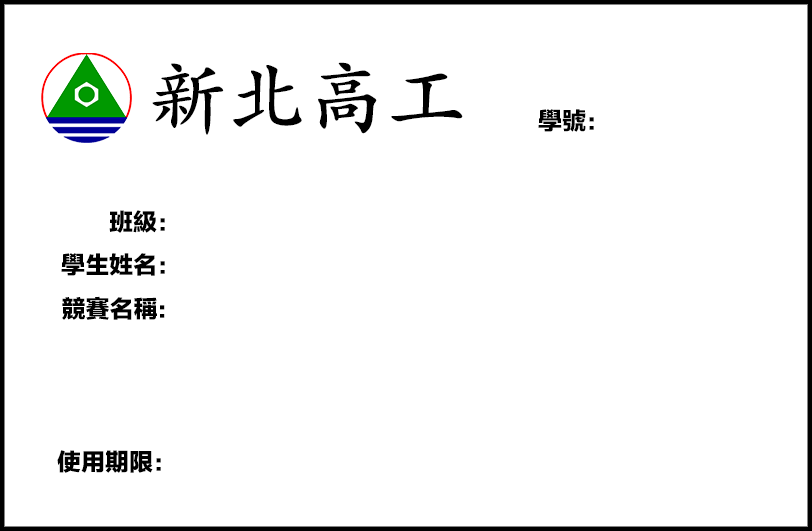
<style>
.page{position:relative;width:812px;height:531px;background:#ffffff}
.page>*{position:absolute;margin:0}
.t1{font:80px "STKaitiTC-Bold";color:#000000}
.t2{font:24px "FZLTTHK--GBK1-0";color:#000000}
</style>
<div class="page">
<p class="t1" style="left:152px;top:62px;width:311px;height:73px">新北高工</p>
<p class="t2" style="left:538px;top:109px;width:56px;height:23px">學號 ：</p>
<p class="t2" style="left:109px;top:210px;width:56px;height:23px">班級 ：</p>
<p class="t2" style="left:61px;top:253px;width:104px;height:23px">學生姓名 ：</p>
<p class="t2" style="left:62px;top:296px;width:103px;height:24px">競賽名稱：</p>
<p class="t2" style="left:57px;top:450px;width:104px;height:23px">使用期限 ：</p>
</div>
